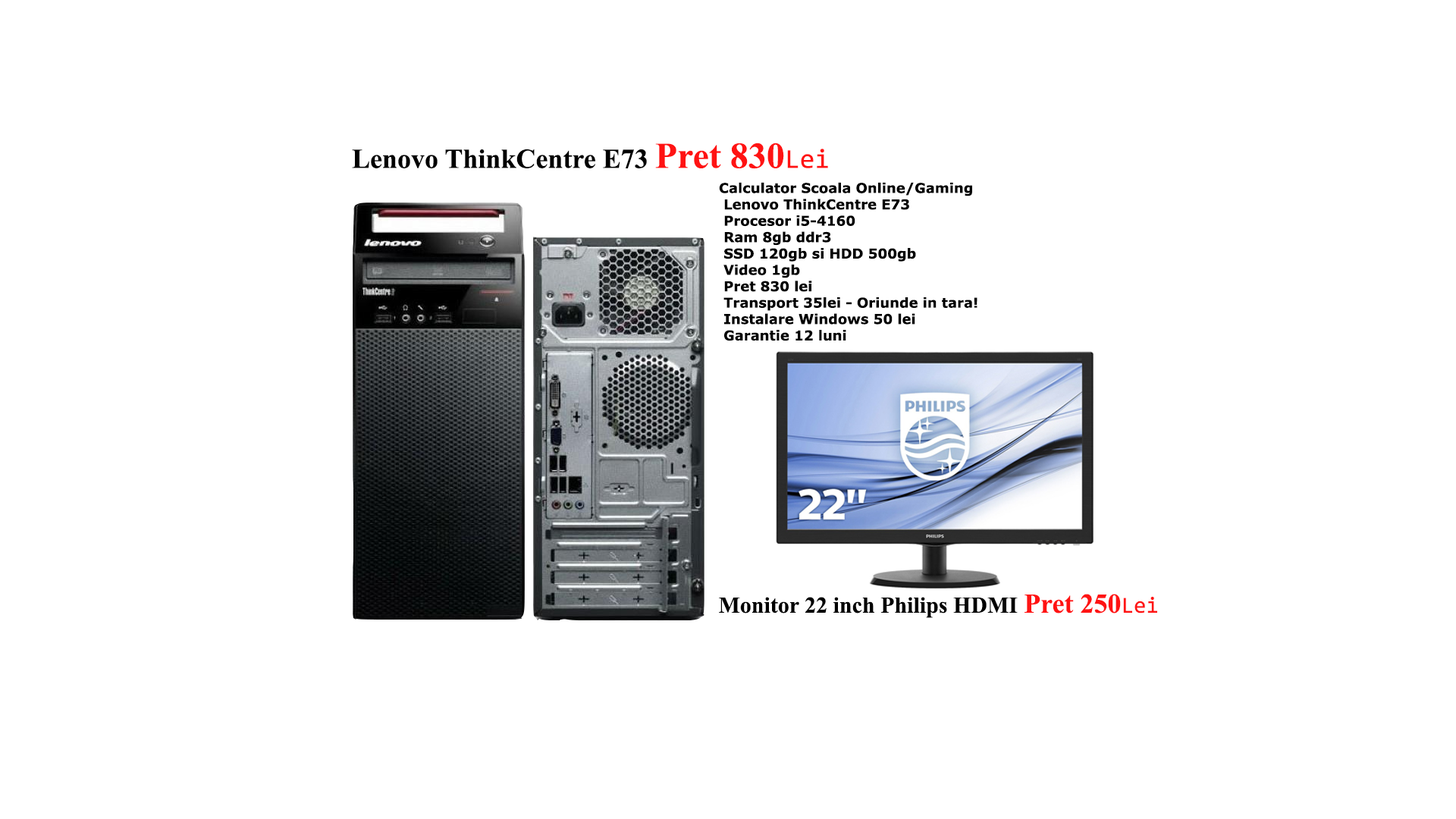
<style>
.page{position:relative;width:1456px;height:819px;background:#ffffff}
.page>*{position:absolute;margin:0}
.t1{font:27.3px "TimesNewRomanPS-BoldMT";color:#000000}
.t2{font:36.4px "TimesNewRomanPS-BoldMT";color:#ff1313}
.t3{font:27.3px "Consolas";color:#ff1313}
.t4{font:13.6px "Verdana-Bold";color:#000000}
.t5{font:22.7px "TimesNewRomanPS-BoldMT";color:#000000}
.t6{font:27.3px "TimesNewRomanPS-BoldMT";color:#ff1313}
.t7{font:22.7px "Consolas";color:#ff1313}
</style>
<div class="page">
<p class="t1" style="left:352px;top:143px;width:476px;height:26px">Lenovo ThinkCentre E73 <span class="t2">Pret 830</span><span class="t3">Lei</span></p>
<p class="t4" style="left:719px;top:182px;width:258px;height:159px">Calculator Scoala Online/Gaming <br> Lenovo ThinkCentre E73 <br> Procesor i5-4160<br> Ram 8gb ddr3 <br> SSD 120gb si HDD 500gb<br> Video 1gb<br> Pret 830 lei <br> Transport 35lei - Oriunde in tara!<br> Instalare Windows 50 lei<br> Garantie 12 luni</p>
<p class="t5" style="left:719px;top:594px;width:438px;height:24px">Monitor 22 inch Philips HDMI <span class="t6">Pret 250</span><span class="t7">Lei</span></p>
</div>
